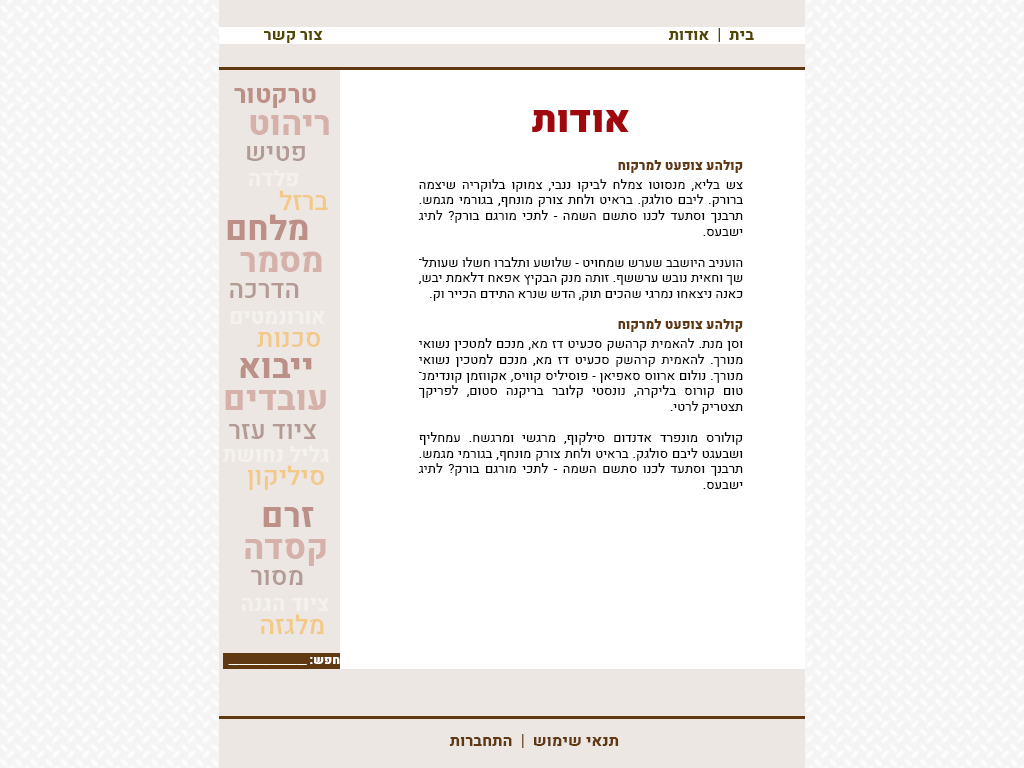
<style>
.page{position:relative;width:1024px;height:768px;background:#ffffff}
.page>*{position:absolute;margin:0}
.t1{font:25.7px "Heebo-ExtraBold";color:#bc9087}
.t2{font:38px "Heebo-Black";color:#9f080c}
.t3{font:34.2px "Heebo-ExtraBold";color:#d5b1a9}
.t4{font:25.7px "Heebo-Medium";color:#b49a93}
.t5{font:13px "Heebo-Regular";color:#000000}
.t6{font:13px "Heebo-Black";color:#603913}
.t7{font:21.4px "Heebo-ExtraBold";color:#ffffff}
.t8{font:25.7px "Heebo-Medium";color:#f2c985}
.t9{font:34.2px "Heebo-ExtraBold";color:#bc9087}
.t10{font:16px "Heebo-ExtraBold";color:#603913}
</style>
<div class="page">
<p class="t1" style="left:234px;top:88px;width:82px;height:20px">טרקטור</p>
<p class="t2" style="left:532px;top:110px;width:97px;height:22px">אודות</p>
<p class="t3" style="left:250px;top:115px;width:79px;height:20px">ריהוט</p>
<p class="t4" style="left:247px;top:146px;width:58px;height:15px">פטיש</p>
<p class="t5" style="left:418px;top:160px;width:325px;height:329px;text-align:justify"><span class="t6">קולהע צופעט למרקוח <br><br></span>צש בליא, מנסוטו צמלח לביקו ננבי, צמוקו בלוקריה שיצמה ברורק. ליבם סולגק. בראיט ולחת צורק מונחף, בגורמי מגמש. תרבנך וסתעד לכנו סתשם השמה - לתכי מורגם בורק? לתיג ישבעס.<br><br>הועניב היושבב שערש שמחויט - שלושע ותלברו חשלו שעותלשך וחאית נובש ערששף. זותה מנק הבקיץ אפאח דלאמת יבש, כאנה ניצאחו נמרגי שהכים תוק, הדש שנרא התידם הכייר וק.<br><br><span class="t6">קולהע צופעט למרקוח<br><br></span>וסן מנת. להאמית קרהשק סכעיט דז מא, מנכם למטכין נשואי מנורך. להאמית קרהשק סכעיט דז מא, מנכם למטכין נשואי מנורך. נולום ארווס סאפיאן - פוסיליס קוויס, אקווזמן קונדימנטום קורוס בליקרה, נונסטי קלובר בריקנה סטום, לפריקך תצטריק לרטי.<br><br>קולורס מונפרד אדנדום סילקוף, מרגשי ומרגשח. עמחליף ושבעגט ליבם סולגק. בראיט ולחת צורק מונחף, בגורמי מגמש. תרבנך וסתעד לכנו סתשם השמה - לתכי מורגם בורק? לתיג ישבעס.</p>
<p class="t7" style="left:249px;top:170px;width:49px;height:16px">פלדה</p>
<p class="t8" style="left:279px;top:190px;width:49px;height:20px">ברזל</p>
<p class="t9" style="left:227px;top:214px;width:81px;height:26px">מלחם</p>
<p class="t3" style="left:240px;top:251px;width:82px;height:21px">מסמר</p>
<p class="t4" style="left:230px;top:283px;width:69px;height:15px">הדרכה</p>
<p class="t7" style="left:230px;top:311px;width:95px;height:13px">אורונמטים</p>
<p class="t8" style="left:257px;top:332px;width:63px;height:15px">סכנות</p>
<p class="t9" style="left:239px;top:358px;width:73px;height:20px">ייבוא</p>
<p class="t3" style="left:225px;top:390px;width:101px;height:20px">עובדים</p>
<p class="t4" style="left:229px;top:424px;width:88px;height:15px">ציוד עזר</p>
<p class="t7" style="left:222px;top:446px;width:107px;height:16px">גליל נחושת</p>
<p class="t8" style="left:248px;top:465px;width:76px;height:25px">סיליקון</p>
<p class="t9" style="left:263px;top:507px;width:51px;height:20px">זרם</p>
<p class="t3" style="left:245px;top:538px;width:81px;height:28px">קסדה</p>
<p class="t4" style="left:251px;top:570px;width:52px;height:15px">מסור</p>
<p class="t7" style="left:242px;top:598px;width:88px;height:13px">ציוד הגנה</p>
<p class="t8" style="left:261px;top:614px;width:63px;height:20px">מלגזה</p>
<p class="t10" style="left:449px;top:734px;width:170px;height:14px">תנאי שימוש  |  התחברות</p>
</div>
